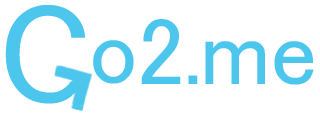
<style>
.page{position:relative;width:320px;height:116px;background:#ffffff}
.page>*{position:absolute;margin:0}
.t1{font:96px "MS-UIGothic";color:#4cc6ed}
</style>
<div class="page">
<p class="t1" style="left:141px;top:19px;width:40px;height:65px">2</p>
<p class="t1" style="left:93px;top:40px;width:41px;height:44px">o</p>
<p class="t1" style="left:205px;top:41px;width:109px;height:44px">me</p>
<p class="t1" style="left:188px;top:75px;width:10px;height:9px">.</p>
</div>
